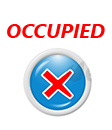
<style>
.page{position:relative;width:112px;height:130px;background:#ffffff}
.page>*{position:absolute;margin:0}
.t1{font:20px "SegoeUI-BoldItalic";color:#ff0000}
</style>
<div class="page">
<p class="t1" style="left:7px;top:24px;width:98px;height:14px">OCCUPIED</p>
</div>
